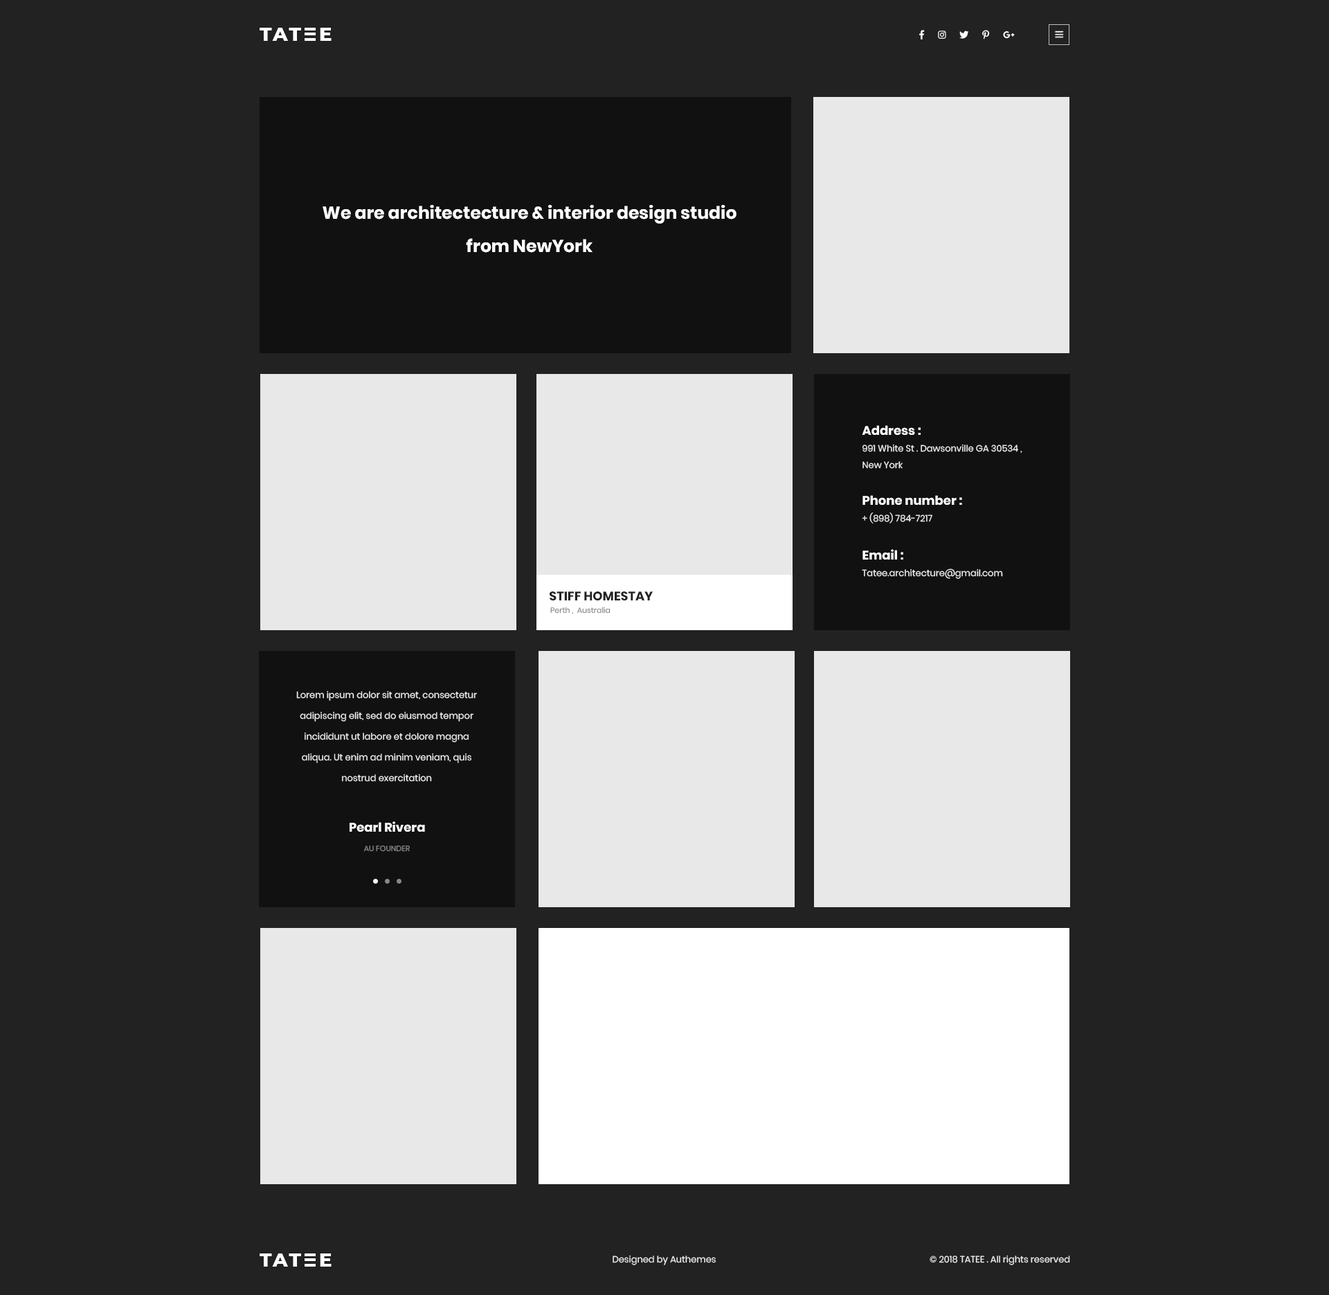
<style>
.page{position:relative;width:1329px;height:1295px;background:#222222}
.page>*{position:absolute;margin:0}
.t1{font:19.1px "Montserrat-ExtraBold";letter-spacing:0.1em;color:#ffffff;text-transform:uppercase}
.t2{font:17.3px/33.2px "Poppins-Bold";color:#ffffff}
.t3{font:9px/16.6px "Poppins-Regular";color:#ebebeb}
.t4{font:12.5px/16.6px "Poppins-Bold";color:#ffffff}
.t5{font:12.5px "Poppins-Bold";color:#222222;text-transform:uppercase}
.t6{font:7.6px "Poppins-Regular";color:#888888}
.t7{font:9px/20.8px "Poppins-Regular";color:#ebebeb}
.t8{font:12.5px "Poppins-Bold";color:#ffffff}
.t9{font:7.6px "Poppins-Regular";color:#888888;text-transform:uppercase}
.t10{font:9px "Poppins-Regular";color:#ebebeb}
</style>
<div class="page">
<p class="t1" style="left:260px;top:28px;width:41px;height:13px">tat</p>
<p class="t1" style="left:320px;top:28px;width:12px;height:13px">e</p>
<p class="t2" style="left:323px;top:204px;width:414px;height:49px;text-align:center">We are architectecture &amp; interior design studio from NewYork</p>
<p class="t3" style="left:862px;top:425px;width:161px;height:44px"><span class="t4">Address : <br></span>991 White St . Dawsonville GA 30534 , <br>New York</p>
<p class="t3" style="left:862px;top:495px;width:100px;height:28px"><span class="t4">Phone number : <br></span>+ (898) 784-7217</p>
<p class="t3" style="left:862px;top:549px;width:141px;height:30px"><span class="t4">Email : <br></span>Tatee.architecture@gmail.com</p>
<p class="t5" style="left:550px;top:591px;width:103px;height:9px">Stiff homestay</p>
<p class="t6" style="left:550px;top:606px;width:61px;height:8px">Perth ,  Australia</p>
<p class="t7" style="left:296px;top:690px;width:181px;height:92px;text-align:center">Lorem ipsum dolor sit amet, consectetur adipiscing elit, sed do eiusmod tempor incididunt ut labore et dolore magna aliqua. Ut enim ad minim veniam, quis nostrud exercitation</p>
<p class="t8" style="left:350px;top:821px;width:75px;height:10px">Pearl Rivera</p>
<p class="t9" style="left:363px;top:845px;width:47px;height:7px">Au Founder</p>
<p class="t1" style="left:260px;top:1253px;width:41px;height:13px">tat</p>
<p class="t1" style="left:320px;top:1253px;width:12px;height:13px">e</p>
<p class="t10" style="left:613px;top:1254px;width:103px;height:11px">Designed by Authemes</p>
<p class="t10" style="left:930px;top:1254px;width:140px;height:11px">© 2018 TATEE . All rights reserved</p>
</div>
